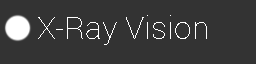
<style>
.page{position:relative;width:256px;height:64px;background:#333333}
.page>*{position:absolute;margin:0}
.t1{font:32px "Roboto-Thin";color:#ffffff}
</style>
<div class="page">
<p class="t1" style="left:38px;top:15px;width:169px;height:30px">X-Ray Vision</p>
</div>
